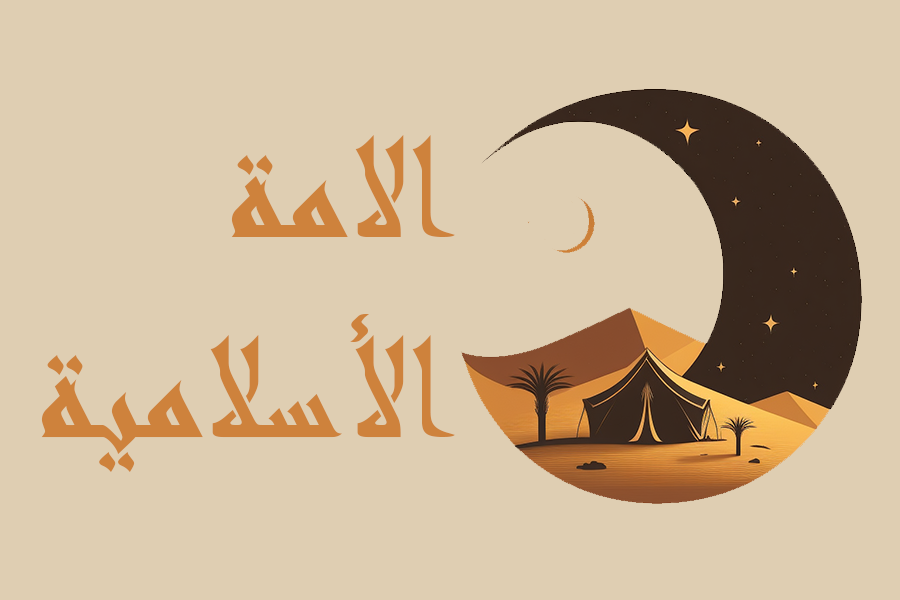
<style>
.page{position:relative;width:900px;height:600px;background:#dfceb2}
.page>*{position:absolute;margin:0}
.t1{font:166.7px "Andalus";color:#ce823c}
</style>
<div class="page">
<p class="t1" style="left:41px;top:135px;width:414px;height:337px;text-align:right">الامة<br>الأسلامية</p>
</div>
